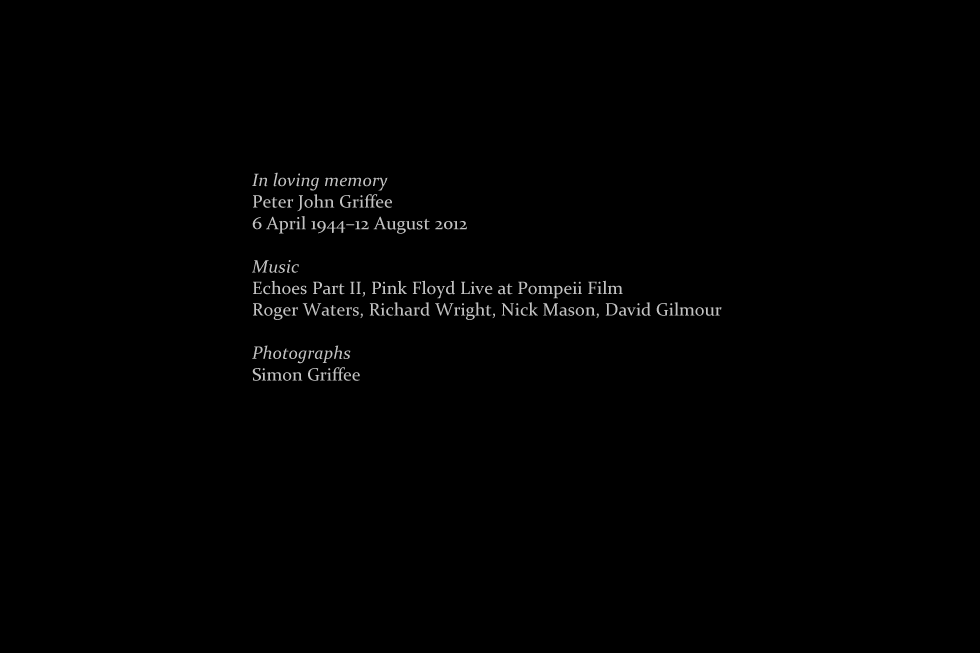
<style>
.page{position:relative;width:980px;height:653px;background:#000000}
.page>*{position:absolute;margin:0}
.t1{font:18px "Constantia";letter-spacing:0.005em;color:#c2c2c2}
.t2{font:18px "Constantia-Italic";letter-spacing:0.005em;color:#c2c2c2}
</style>
<div class="page">
<p class="t1" style="left:252px;top:172px;width:470px;height:209px"><span class="t2">In loving memory<br></span>Peter John Griffee<br>6 April 1944–12 August 2012<br><br><span class="t2">Music<br></span>Echoes Part II, Pink Floyd Live at Pompeii Film<br>Roger Waters, Richard Wright, Nick Mason, David Gilmour<span class="t2"><br><br>Photographs<br></span>Simon Griffee</p>
</div>
